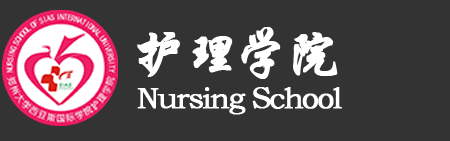
<style>
.page{position:relative;width:450px;height:141px;background:#333333}
.page>*{position:absolute;margin:0}
.t1{font:55px "STXingkai";letter-spacing:-0.1em;color:#ffffff;font-weight:bold}
.t2{font:30px "STZhongsong";letter-spacing:-0.075em;color:#ffffff;font-weight:bold}
</style>
<div class="page">
<p class="t1" style="left:137px;top:27px;width:201px;height:52px">护理学院</p>
<p class="t2" style="left:137px;top:87px;width:205px;height:28px">Nursing School</p>
</div>
